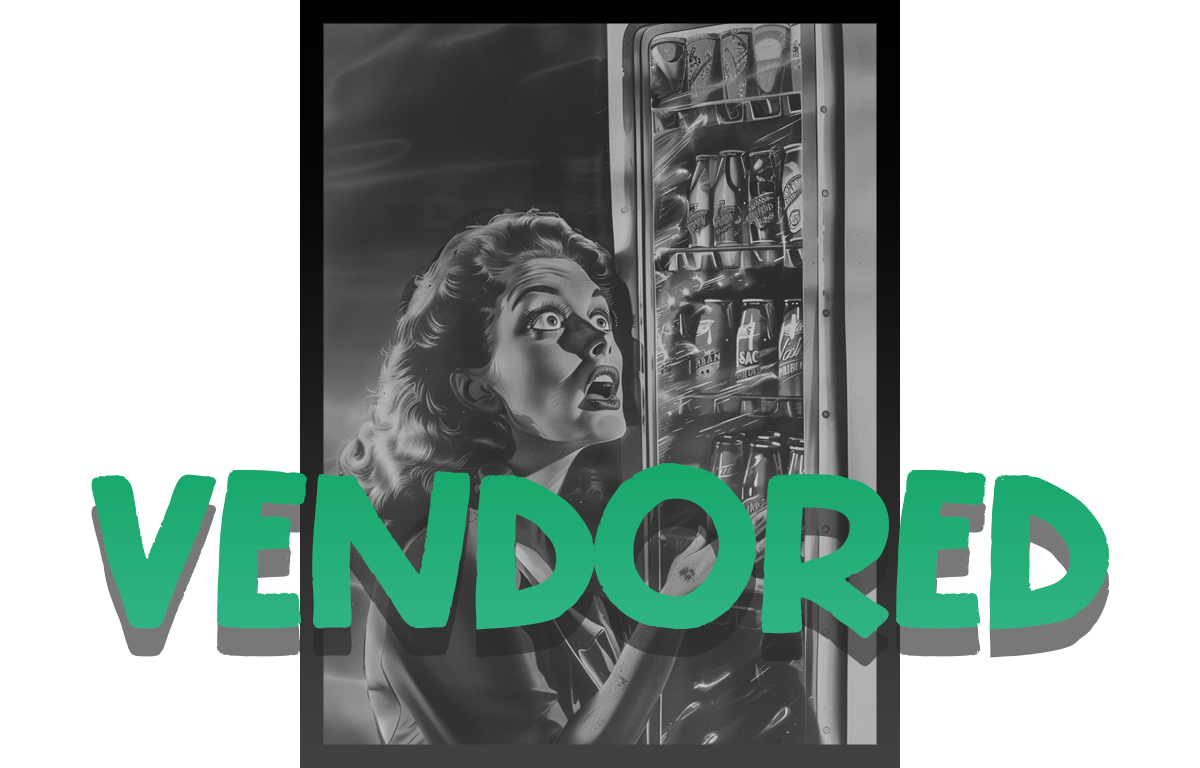
<style>
.page{position:relative;width:1200px;height:768px;background:#ffffff}
.page>*{position:absolute;margin:0}
.t1{font:221.5px "Insomnyacs";color:#24ad77;scale:1.12 1}
</style>
<div class="page">
<p class="t1" style="left:91px;top:463px;width:1018px;height:176px">VENDORED</p>
</div>
